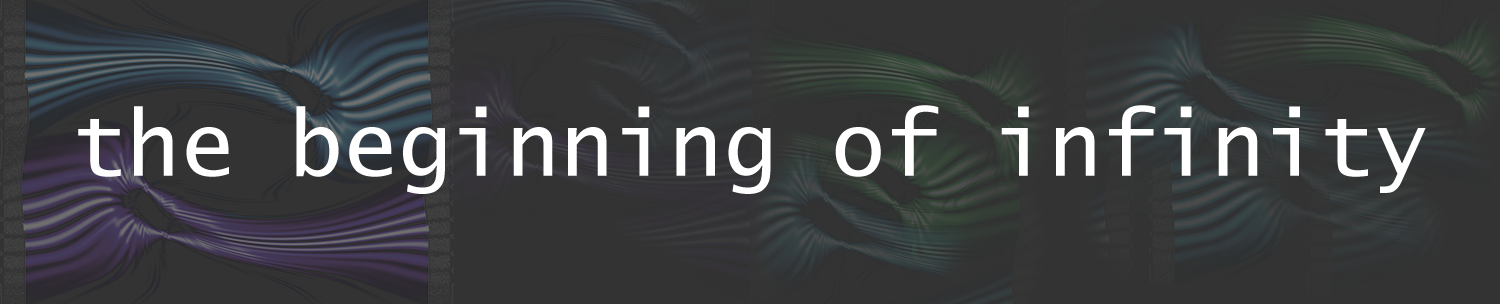
<style>
.page{position:relative;width:1500px;height:304px;background:#333333}
.page>*{position:absolute;margin:0}
.t1{font:90px "LucidaSans-Typewriter";color:#ffffff}
</style>
<div class="page">
<p class="t1" style="left:78px;top:105px;width:1348px;height:89px">the beginning of infinity</p>
</div>
